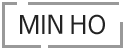
<style>
.page{position:relative;width:125px;height:50px;background:#ffffff}
.page>*{position:absolute;margin:0}
.t1{font:25px "NanumBarunGothic";color:#222222}
</style>
<div class="page">
<p class="t1" style="left:20px;top:14px;width:85px;height:21px">MIN HO</p>
</div>
